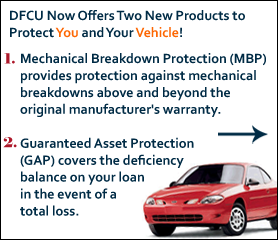
<style>
.page{position:relative;width:278px;height:240px;background:#ffffff}
.page>*{position:absolute;margin:0}
.t1{font:14.1px "Corbel-Bold";color:#002b45}
.t2{font:14.1px "Corbel-Bold";color:#fd6703}
.t3{font:14.1px "Elephant-Regular";color:#ad182a}
</style>
<div class="page">
<p class="t1" style="left:10px;top:10px;width:235px;height:28px">DFCU Now Offers Two New Products to Protect <span class="t2">You </span>and Your <span class="t2">Vehicle</span>!</p>
<p class="t3" style="left:4px;top:53px;width:11px;height:11px">1.</p>
<p class="t1" style="left:20px;top:53px;width:246px;height:163px">Mechanical Breakdown Protection (MBP) provides protection against mechanical breakdowns above and beyond the <br>original manufacturer's warranty.<br><br>Guaranteed Asset Protection <br>(GAP) covers the deficiency <br>balance on your loan <br>in the event of a <br>total loss.</p>
<p class="t3" style="left:3px;top:137px;width:14px;height:11px">2.</p>
</div>
